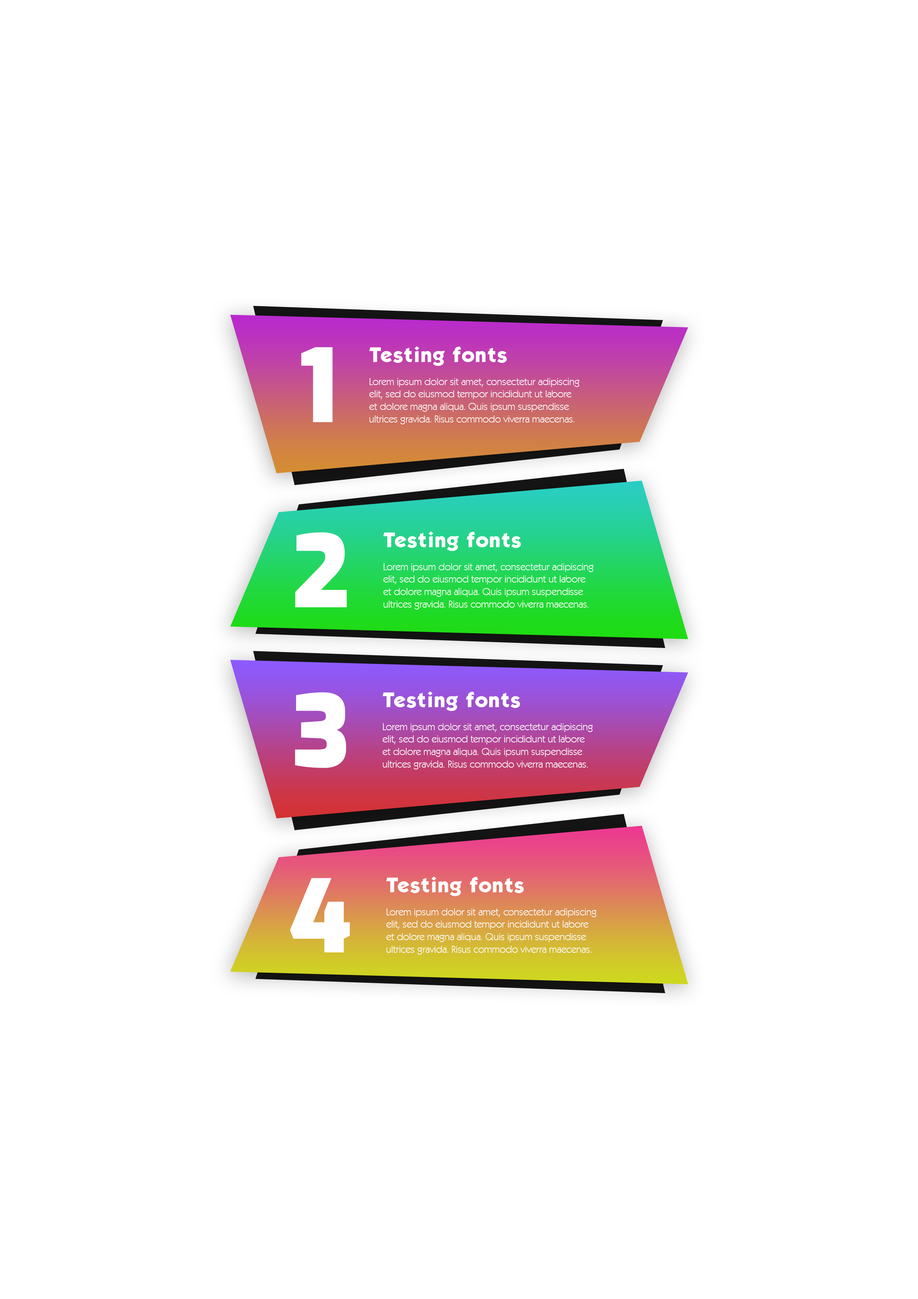
<style>
.page{position:relative;width:918px;height:1299px;background:#ffffff}
.page>*{position:absolute;margin:0}
.t1{font:100px "Exo-Black";color:#ffffff}
.t2{font:18.5px "KabelBd-Normal";color:#ffffff}
.t3{font:10.4px "KabelITCbyBT-Book";color:#ffffff}
</style>
<div class="page">
<p class="t1" style="left:301px;top:347px;width:32px;height:75px">1</p>
<p class="t2" style="left:369px;top:346px;width:138px;height:20px">Testing fonts</p>
<p class="t3" style="left:369px;top:378px;width:210px;height:46px">Lorem ipsum dolor sit amet, consectetur adipiscing elit, sed do eiusmod tempor incididunt ut labore et dolore magna aliqua. Quis ipsum suspendisse ultrices gravida. Risus commodo viverra maecenas.</p>
<p class="t1" style="left:295px;top:532px;width:52px;height:75px">2</p>
<p class="t2" style="left:383px;top:531px;width:138px;height:20px">Testing fonts</p>
<p class="t3" style="left:383px;top:563px;width:210px;height:46px">Lorem ipsum dolor sit amet, consectetur adipiscing elit, sed do eiusmod tempor incididunt ut labore et dolore magna aliqua. Quis ipsum suspendisse ultrices gravida. Risus commodo viverra maecenas.</p>
<p class="t1" style="left:295px;top:692px;width:51px;height:76px">3</p>
<p class="t2" style="left:382px;top:691px;width:138px;height:20px">Testing fonts</p>
<p class="t3" style="left:382px;top:723px;width:211px;height:46px">Lorem ipsum dolor sit amet, consectetur adipiscing elit, sed do eiusmod tempor incididunt ut labore et dolore magna aliqua. Quis ipsum suspendisse ultrices gravida. Risus commodo viverra maecenas.</p>
<p class="t1" style="left:290px;top:878px;width:60px;height:74px">4</p>
<p class="t2" style="left:386px;top:876px;width:138px;height:20px">Testing fonts</p>
<p class="t3" style="left:386px;top:908px;width:210px;height:46px">Lorem ipsum dolor sit amet, consectetur adipiscing elit, sed do eiusmod tempor incididunt ut labore et dolore magna aliqua. Quis ipsum suspendisse ultrices gravida. Risus commodo viverra maecenas.</p>
</div>
